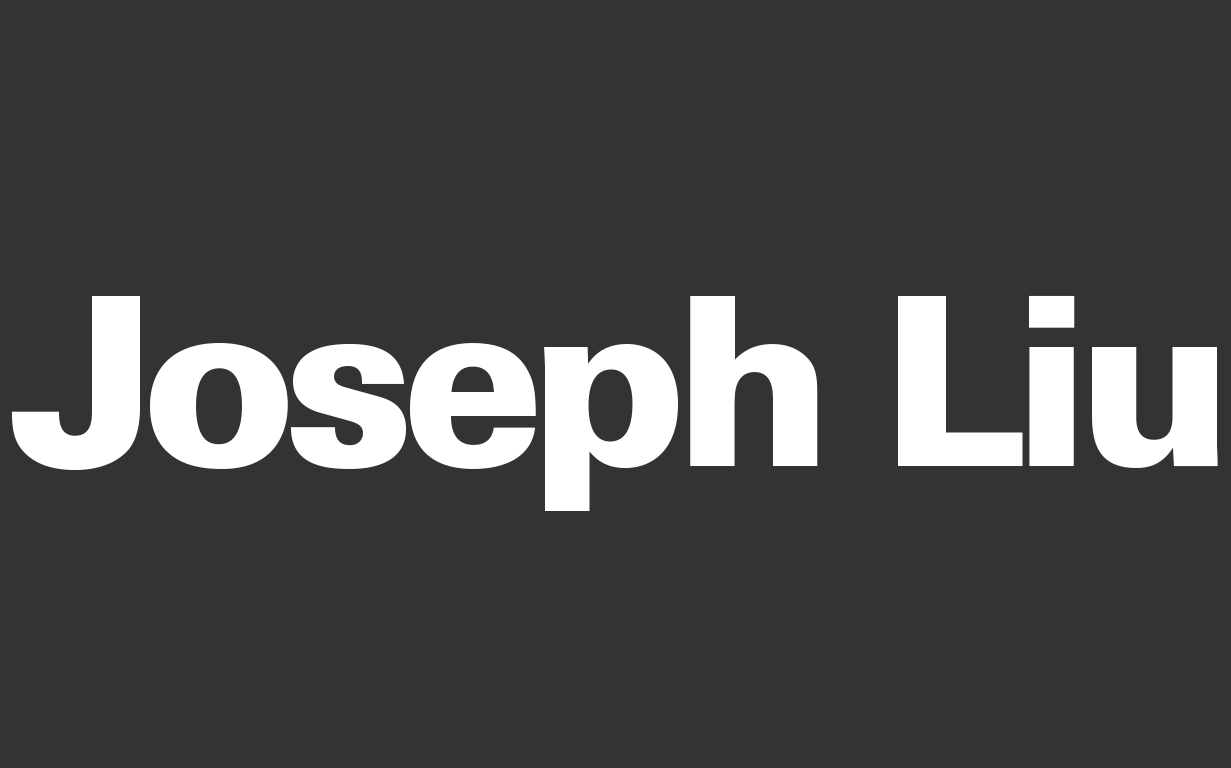
<style>
.page{position:relative;width:1231px;height:768px;background:#333333}
.page>*{position:absolute;margin:0}
.t1{font:236.1px "Univers-Black";letter-spacing:-0.06em;color:#ffffff}
</style>
<div class="page">
<p class="t1" style="left:12px;top:295px;width:1206px;height:216px">Joseph Liu</p>
</div>
